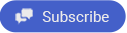
<style>
.page{position:relative;width:127px;height:33px;background:#4460c9}
.page>*{position:absolute;margin:0}
.t1{font:15.4px "Roboto-Regular";color:#ebebeb}
</style>
<div class="page">
<p class="t1" style="left:42px;top:11px;width:67px;height:11px">Subscribe</p>
</div>
